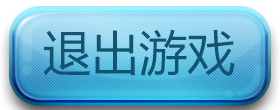
<style>
.page{position:relative;width:280px;height:110px}
.page>*{position:absolute;margin:0}
.t1{font:48px "MicrosoftYaHei";color:#115572}
</style>
<div class="page">
<p class="t1" style="left:43px;top:29px;width:192px;height:47px">退出游戏</p>
</div>
